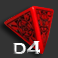
<style>
.page{position:relative;width:58px;height:58px;background:#333333}
.page>*{position:absolute;margin:0}
.t1{font:20px "CopperplateGothic-Bold"}
</style>
<div class="page">
<p class="t1" style="left:13px;top:41px;width:27px;height:13px">d4</p>
</div>
